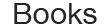
<style>
.page{position:relative;width:109px;height:28px;background:#ffffff}
.page>*{position:absolute;margin:0}
.t1{font:30px "HelveticaNeue";color:#242424}
</style>
<div class="page">
<p class="t1" style="left:14px;top:3px;width:83px;height:21px">Books</p>
</div>
